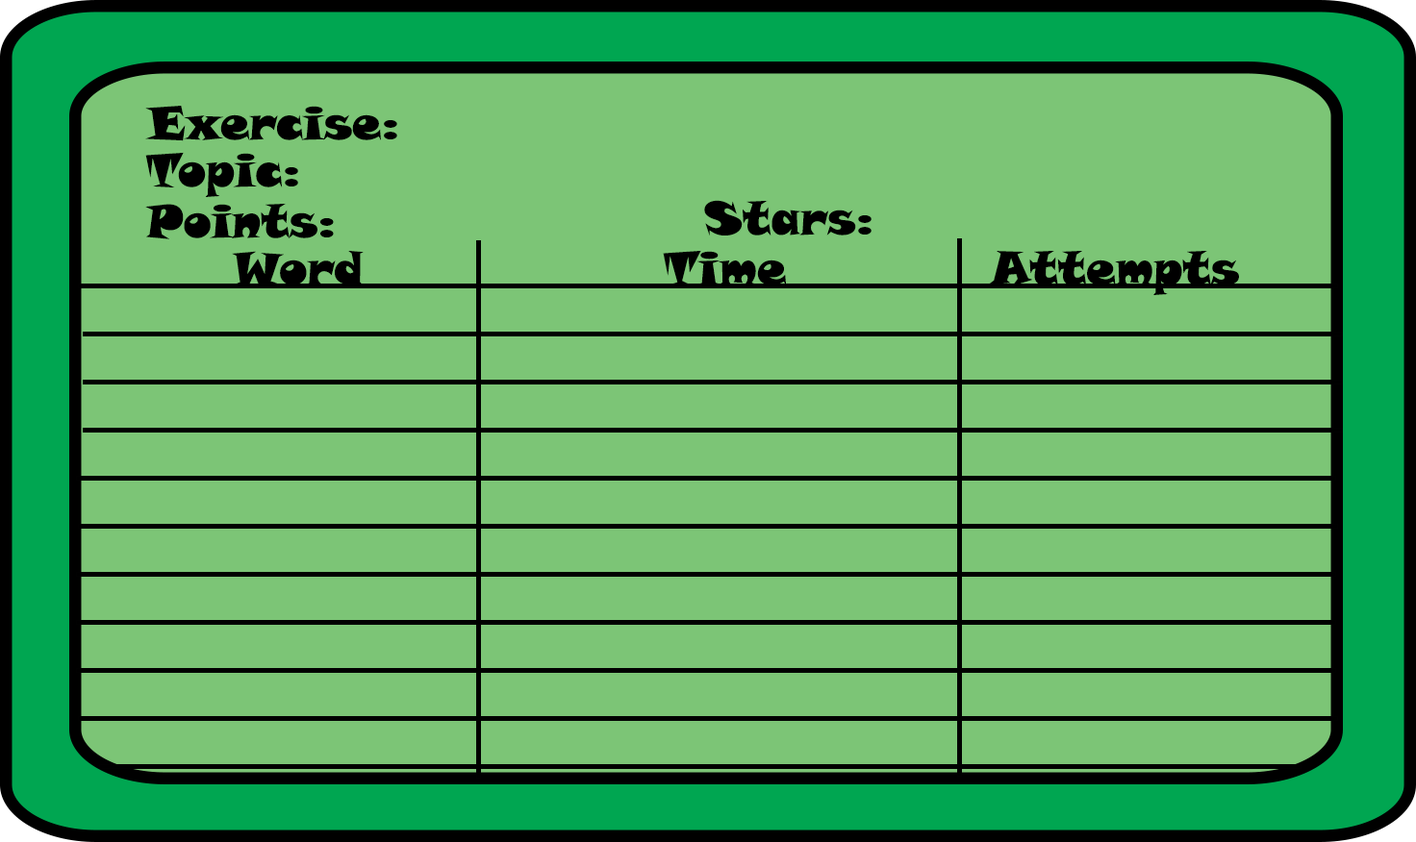
<style>
.page{position:relative;width:1416px;height:842px;background:#7cc576}
.page>*{position:absolute;margin:0}
.t1{font:46.2px "SnapITC-Regular";color:#000000}
</style>
<div class="page">
<p class="t1" style="left:145px;top:106px;width:252px;height:35px">Exercise:</p>
<p class="t1" style="left:145px;top:152px;width:153px;height:45px">Topic:</p>
<p class="t1" style="left:145px;top:203px;width:189px;height:36px">Points:</p>
<p class="t1" style="left:704px;top:200px;width:167px;height:36px">Stars:</p>
<p class="t1" style="left:232px;top:251px;width:131px;height:36px">Word</p>
<p class="t1" style="left:663px;top:251px;width:124px;height:36px">Time</p>
<p class="t1" style="left:988px;top:251px;width:251px;height:44px">Attempts</p>
</div>
